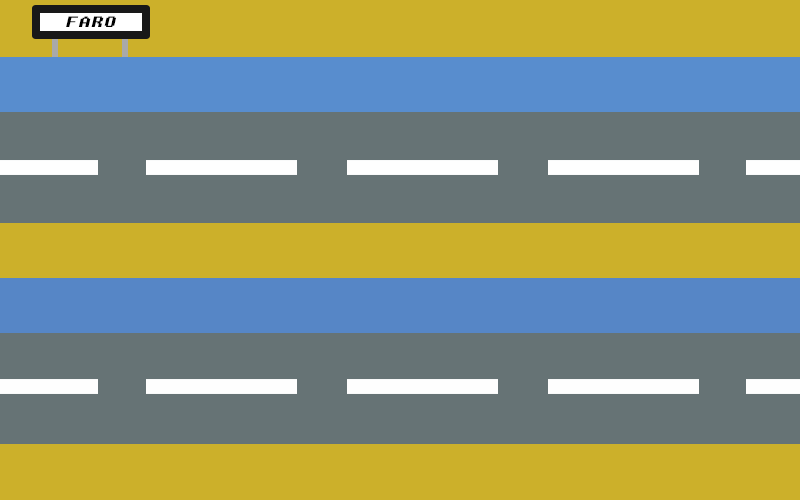
<style>
.page{position:relative;width:800px;height:500px;background:#667375}
.page>*{position:absolute;margin:0}
.t1{font:15px "Fixedsys";color:#000000;font-style:italic;scale:1.36 1}
</style>
<div class="page">
<p class="t1" style="left:66px;top:16px;width:50px;height:11px;text-align:center">FARO<br><br>OO</p>
</div>
